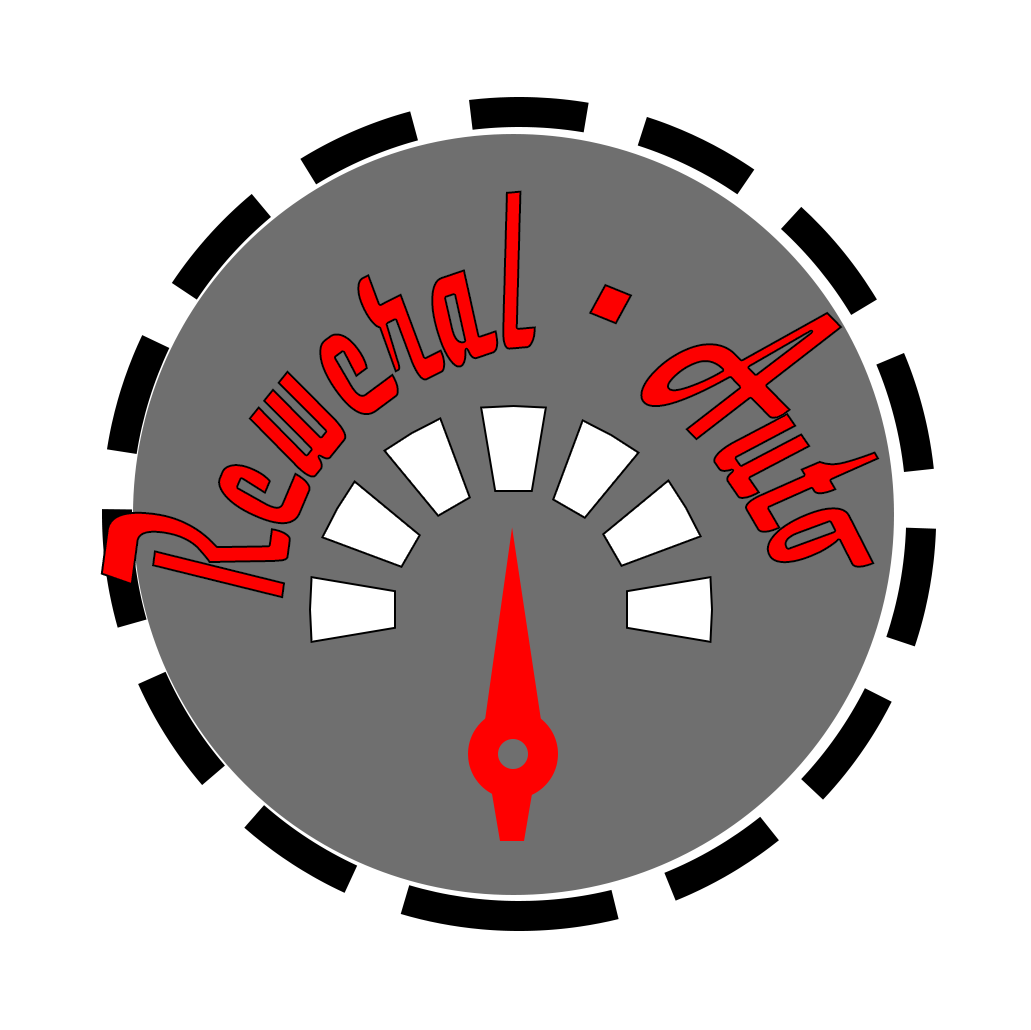
<style>
.page{position:relative;width:1031px;height:1030px;background:#ffffff}
.page>*{position:absolute;margin:0}
.t1{font:267px "Magneto-Bold";color:#fd0000;scale:0.33 1}
</style>
<div class="page">
<p class="t1" style="left:100px;top:190px;width:780px;height:409px">Reweral - Auto</p>
</div>
